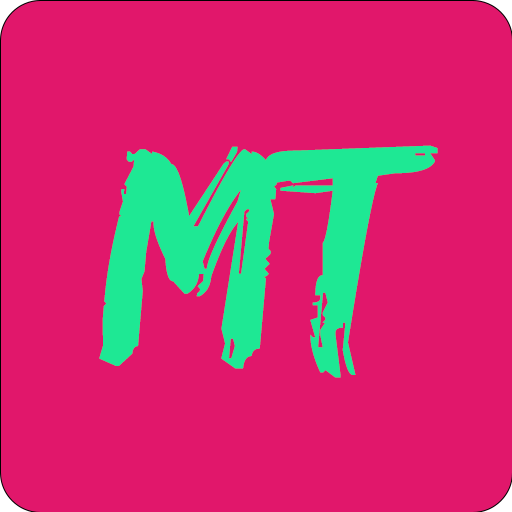
<style>
.page{position:relative;width:512px;height:512px;background:#e1176b}
.page>*{position:absolute;margin:0}
.t1{font:300px "EdoSZHQ-Regular";color:#1ee894}
</style>
<div class="page">
<p class="t1" style="left:99px;top:145px;width:339px;height:233px">MT</p>
</div>
